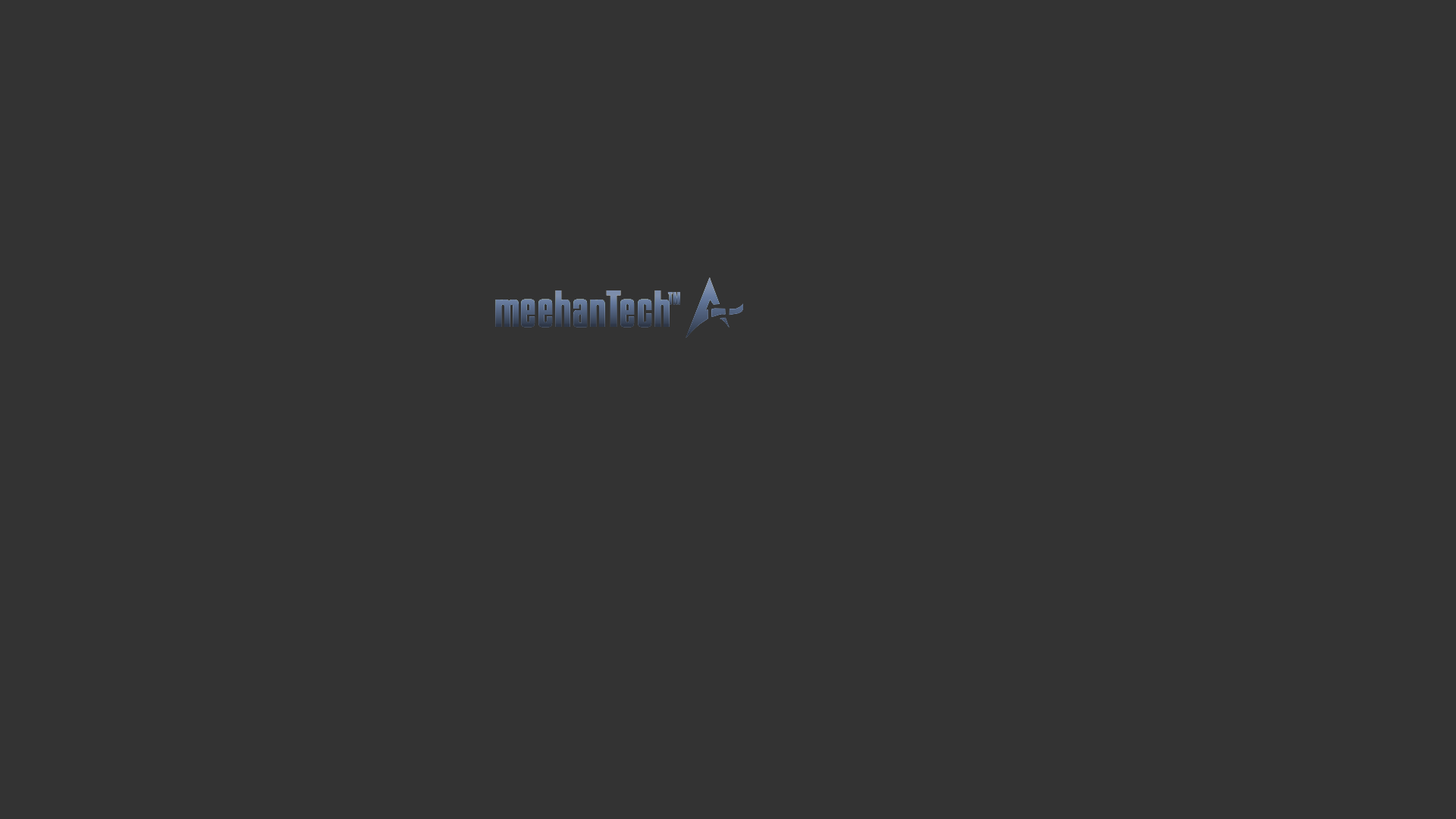
<style>
.page{position:relative;width:1456px;height:819px;background:#333333}
.page>*{position:absolute;margin:0}
.t1{font:44.4px "KenyanCoffeeRg-Regular";font-weight:bold}
.t2{font:14.3px "KenyanCoffeeRg-Regular";font-weight:bold}
</style>
<div class="page">
<p class="t1" style="left:495px;top:290px;width:175px;height:38px">meehanTech</p>
<p class="t2" style="left:667px;top:292px;width:13px;height:13px">TM</p>
</div>
